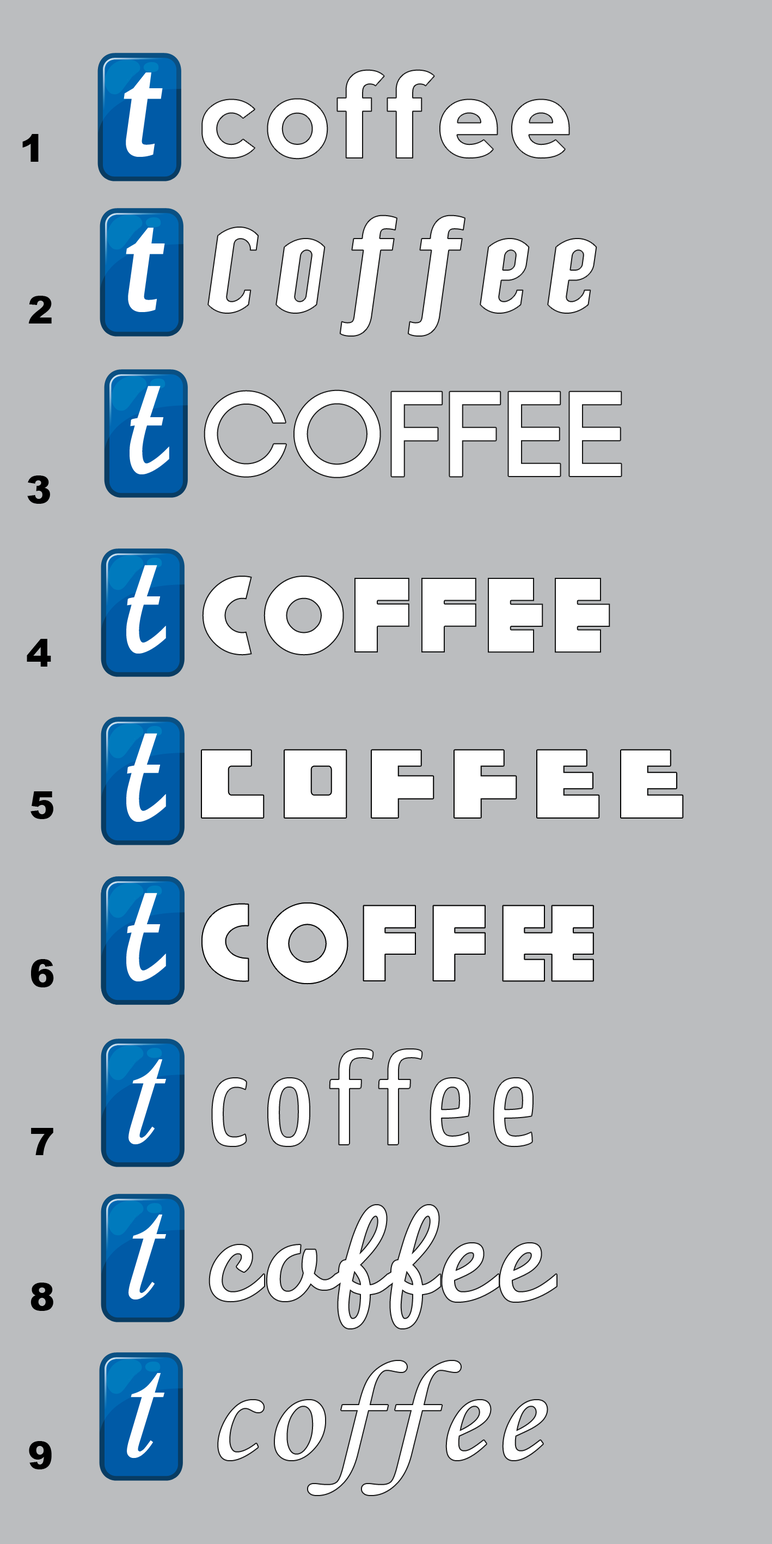
<style>
.page{position:relative;width:772px;height:1544px;background:#bbbdbf}
.page>*{position:absolute;margin:0}
.t1{font:119.8px "TElerysmMono2-Italic";color:#ffffff}
.t2{font:119.8px "nevis-Bold";letter-spacing:0.04em;color:#ffffff}
.t3{font:38.1px "Arial-Black";color:#000000}
.t4{font:130.7px "TElerysmMono2-Italic";letter-spacing:0.08em;color:#ffffff}
.t5{font:147.1px "JCfg";color:#ffffff}
.t6{font:119.8px "Code-Bold";letter-spacing:0.04em;color:#ffffff}
.t7{font:108.9px "KiloGram";letter-spacing:0.08em;color:#ffffff}
.t8{font:119.8px "Trottoir";letter-spacing:0.08em;color:#ffffff;scale:0.91 1}
.t9{font:106.7px "Geomancy-ExtraBold";letter-spacing:0.1em;color:#ffffff}
.t10{font:130.7px "YanoneKaffeesatz-Regular";letter-spacing:0.12em;color:#ffffff}
.t11{font:147.1px "TimesNewRomanPS-ItalicMT";color:#ffffff}
.t12{font:141.6px "JCfg";color:#ffffff}
.t13{font:141.6px "MonotypeCorsiva";letter-spacing:0.06em;color:#ffffff}
</style>
<div class="page">
<p class="t1" style="left:124px;top:72px;width:39px;height:85px">t</p>
<p class="t2" style="left:202px;top:70px;width:368px;height:89px">coffee</p>
<p class="t3" style="left:22px;top:134px;width:17px;height:28px">1</p>
<p class="t4" style="left:208px;top:215px;width:389px;height:121px">Coffee</p>
<p class="t1" style="left:126px;top:228px;width:39px;height:84px">t</p>
<p class="t3" style="left:28px;top:296px;width:24px;height:28px">2</p>
<p class="t5" style="left:130px;top:386px;width:39px;height:88px">t</p>
<p class="t6" style="left:205px;top:391px;width:416px;height:86px">COFFEE</p>
<p class="t3" style="left:27px;top:475px;width:23px;height:29px">3</p>
<p class="t5" style="left:126px;top:565px;width:40px;height:89px">t</p>
<p class="t7" style="left:202px;top:576px;width:409px;height:80px">cOFFee</p>
<p class="t3" style="left:27px;top:639px;width:24px;height:28px">4</p>
<p class="t5" style="left:126px;top:733px;width:40px;height:89px">t</p>
<p class="t8" style="left:202px;top:750px;width:481px;height:67px">coffee</p>
<p class="t3" style="left:30px;top:791px;width:23px;height:28px">5</p>
<p class="t5" style="left:126px;top:893px;width:40px;height:88px">t</p>
<p class="t5" style="left:126px;top:893px;width:40px;height:88px">t</p>
<p class="t9" style="left:202px;top:903px;width:392px;height:81px">COFFee</p>
<p class="t9" style="left:202px;top:903px;width:392px;height:81px">COFFee</p>
<p class="t3" style="left:31px;top:959px;width:23px;height:28px">6</p>
<p class="t10" style="left:212px;top:1049px;width:321px;height:98px">coffee</p>
<p class="t11" style="left:129px;top:1059px;width:37px;height:86px">t</p>
<p class="t3" style="left:31px;top:1128px;width:22px;height:27px">7</p>
<p class="t12" style="left:210px;top:1205px;width:347px;height:123px">coffee</p>
<p class="t11" style="left:129px;top:1215px;width:37px;height:85px">t</p>
<p class="t3" style="left:30px;top:1283px;width:23px;height:28px">8</p>
<p class="t13" style="left:218px;top:1361px;width:329px;height:134px">coffee</p>
<p class="t11" style="left:127px;top:1373px;width:37px;height:86px">t</p>
<p class="t3" style="left:29px;top:1441px;width:23px;height:28px">9</p>
</div>
